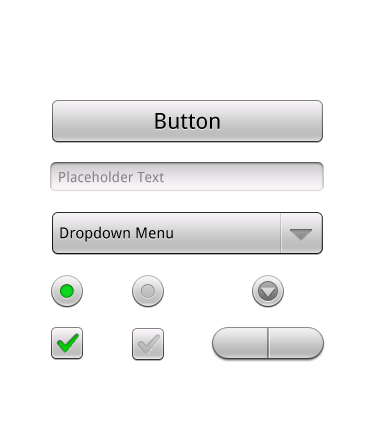
<style>
.page{position:relative;width:375px;height:441px;background:#ffffff}
.page>*{position:absolute;margin:0}
.t1{font:22px "DroidSans";letter-spacing:0.007em;color:#000000}
.t2{font:14px "DroidSans";letter-spacing:0.007em;color:#848284}
.t3{font:15px "DroidSans";letter-spacing:0.007em;color:#000000}
</style>
<div class="page">
<p class="t1" style="left:155px;top:113px;width:65px;height:16px">Button</p>
<p class="t2" style="left:59px;top:171px;width:105px;height:12px">Placeholder Text</p>
<p class="t3" style="left:60px;top:226px;width:113px;height:16px">Dropdown Menu</p>
</div>
